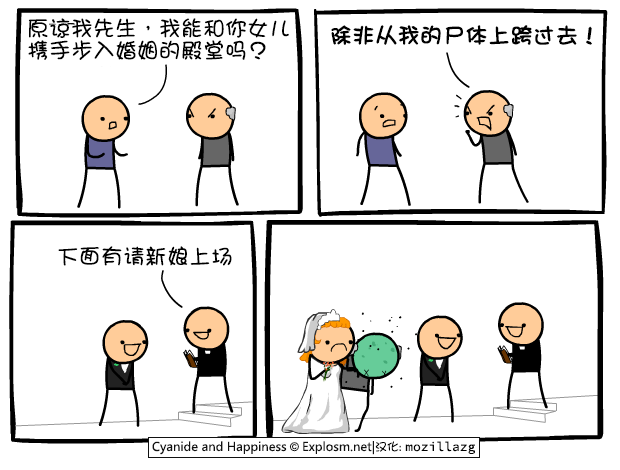
<style>
.page{position:relative;width:620px;height:470px;background:#ffffff}
.page>*{position:absolute;margin:0}
.t1{font:22px/22px "DFGirl";color:#000000}
.t2{font:22px "DFGirl";color:#000000;font-weight:bold}
.t3{font:22px "DFGirl";color:#000000}
</style>
<div class="page">
<p class="t1" style="left:28px;top:18px;width:261px;height:42px">原谅我先生，我能和你女儿<br>携手步入婚姻的殿堂吗？</p>
<p class="t2" style="left:331px;top:25px;width:261px;height:20px">除非从我的尸体上跨过去！</p>
<p class="t3" style="left:58px;top:246px;width:174px;height:20px">下面有请新娘上场</p>
</div>
